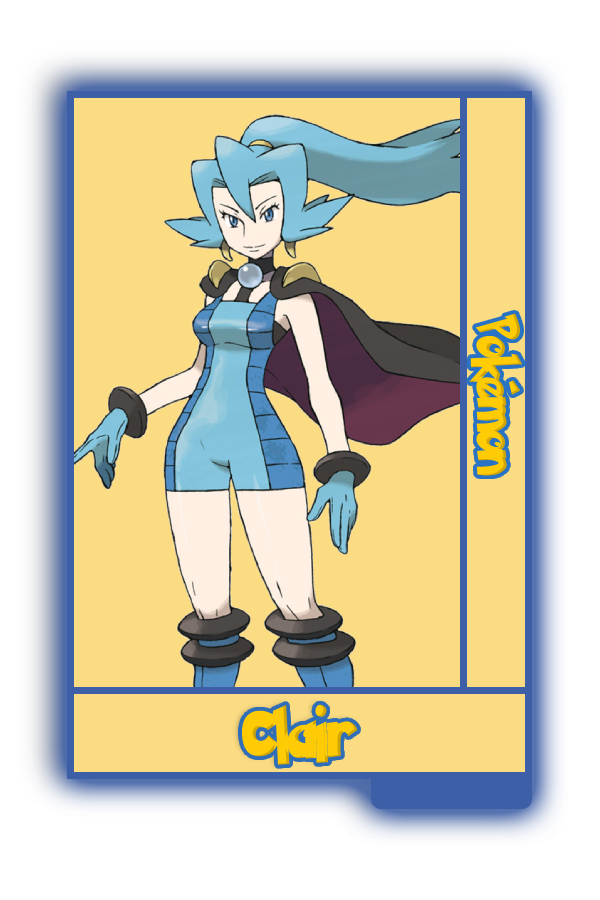
<style>
.page{position:relative;width:600px;height:900px;background:#fbdc83}
.page>*{position:absolute;margin:0}
.t1{font:48.8px "PokemonSolidNormal";color:#ffcb05;scale:0.8 1}
.t2{font:56.6px "PokemonSolidNormal";color:#ffcb05;scale:0.92 1}
</style>
<div class="page">
<p class="t1" style="left:469px;top:313px;width:54px;height:163px;rotate:90deg">Pokémon</p>
<p class="t2" style="left:241px;top:704px;width:117px;height:61px">Clair</p>
</div>
